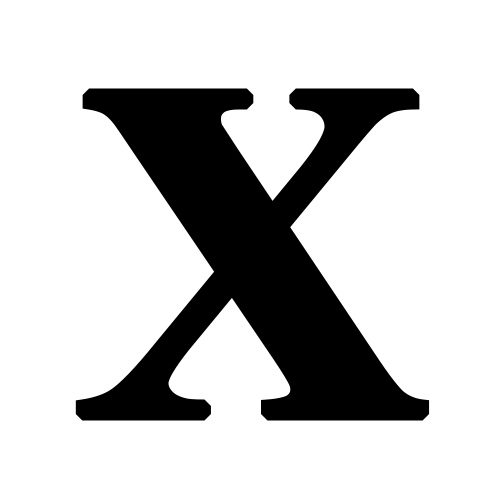
<style>
.page{position:relative;width:500px;height:500px;background:#ffffff}
.page>*{position:absolute;margin:0}
.t1{font:480px "TimesNewRomanPS-BoldMT";color:#000000;font-weight:bold}
</style>
<div class="page">
<p class="t1" style="left:75px;top:88px;width:355px;height:333px">Х</p>
</div>
